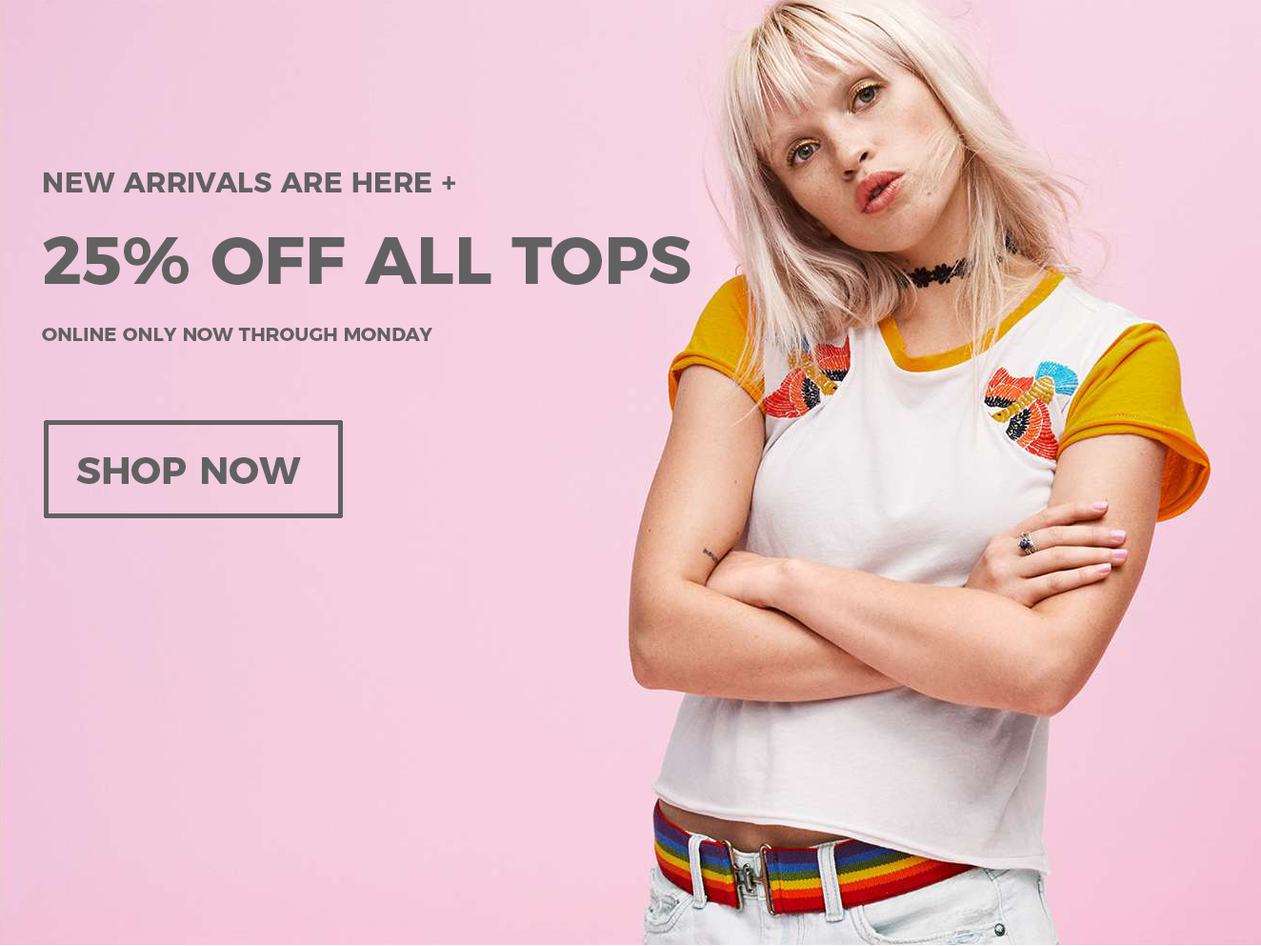
<style>
.page{position:relative;width:1261px;height:946px}
.page>*{position:absolute;margin:0}
.t1{font:19px/28.6px "Montserrat-Bold";color:#626161;text-transform:uppercase}
.t2{font:28.6px/28.6px "Montserrat-Bold";color:#626161;text-transform:uppercase}
.t3{font:66.7px/45.7px "Montserrat-Bold";color:#626161;text-transform:uppercase}
.t4{font:38.1px/28.6px "Montserrat-Bold";color:#626161;text-transform:uppercase}
</style>
<div class="page">
<p class="t1" style="left:42px;top:172px;width:648px;height:312px"><span class="t2">NEW Arrivals are here +<br><br></span><span class="t3">25% Off all tops<br><br></span>Online only now through Monday<br><br><br><span class="t4"><br><br> shop now</span></p>
</div>
